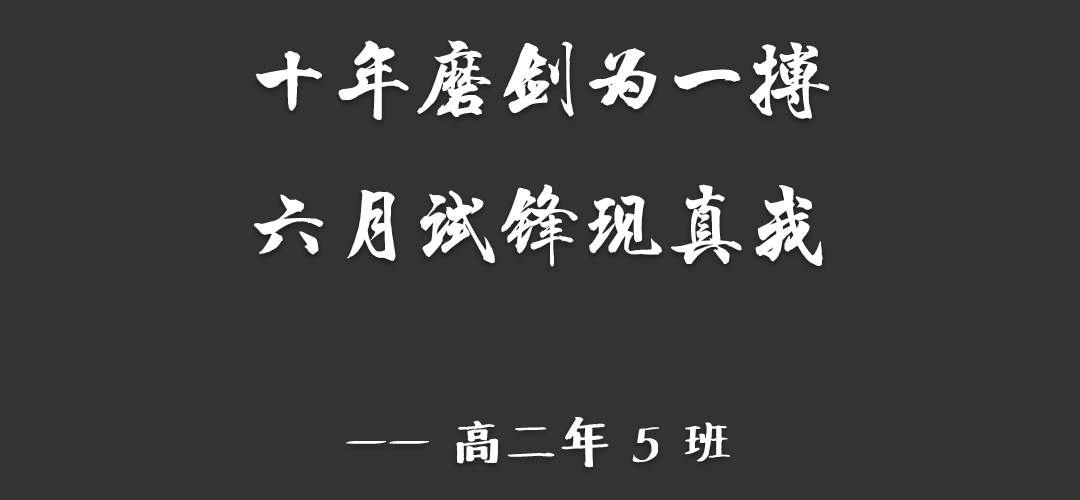
<style>
.page{position:relative;width:1080px;height:500px;background:#333333}
.page>*{position:absolute;margin:0}
.t1{font:83.3px "HYChengXingJ";color:#ffffff}
.t2{font:50px "Undefined";color:#ffffff}
</style>
<div class="page">
<p class="t1" style="left:253px;top:40px;width:577px;height:428px;text-align:center">十年磨剑为一搏<br>六月试锋现真我<br><span class="t2"><br>—— 高二年 5 班</span></p>
</div>
